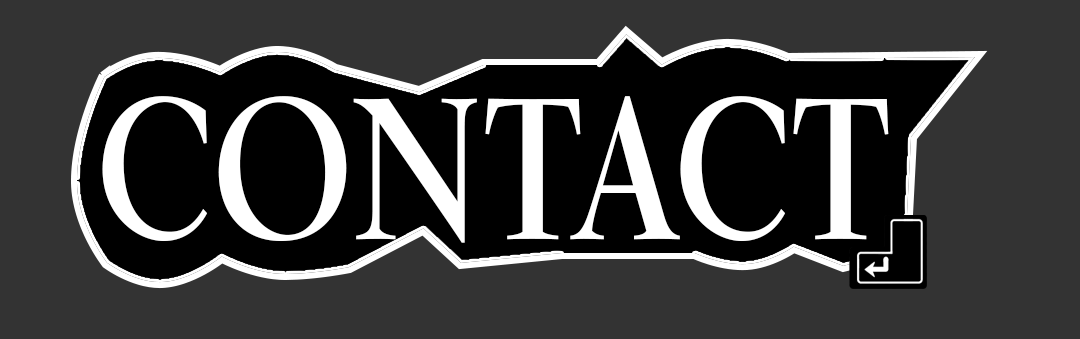
<style>
.page{position:relative;width:1080px;height:339px;background:#333333}
.page>*{position:absolute;margin:0}
.t1{font:200px "KumlienPro-Condensed";color:#ffffff}
</style>
<div class="page">
<p class="t1" style="left:102px;top:96px;width:787px;height:147px">CONTACT</p>
</div>
